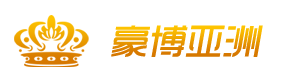
<style>
.page{position:relative;width:302px;height:80px;background:#ffffff}
.page>*{position:absolute;margin:0}
.t1{font:37.5px "TRENDS";font-style:italic}
</style>
<div class="page">
<p class="t1" style="left:111px;top:25px;width:152px;height:32px">豪博亚洲</p>
</div>
